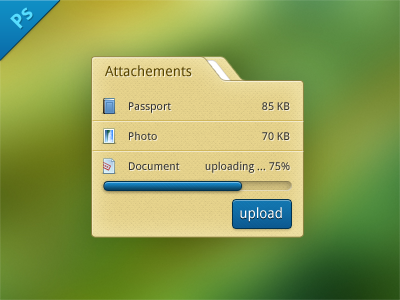
<style>
.page{position:relative;width:400px;height:300px}
.page>*{position:absolute;margin:0}
.t1{font:20px "DroidSans-Bold";color:#57ddff}
.t2{font:14px "DroidSans";color:#564300}
.t3{font:11px "DroidSans";color:#333333}
.t4{font:14px "DroidSans";color:#ffffff}
</style>
<div class="page">
<p class="t1" style="left:10px;top:7px;width:23px;height:22px;rotate:-45deg">Ps</p>
<p class="t2" style="left:105px;top:65px;width:87px;height:12px">Attachements</p>
<p class="t3" style="left:129px;top:102px;width:42px;height:11px">Passport</p>
<p class="t3" style="left:262px;top:102px;width:28px;height:8px">85 KB</p>
<p class="t3" style="left:129px;top:131px;width:28px;height:9px">Photo</p>
<p class="t3" style="left:262px;top:132px;width:28px;height:8px">70 KB</p>
<p class="t3" style="left:205px;top:161px;width:85px;height:12px">uploading ... 75%</p>
<p class="t3" style="left:129px;top:162px;width:51px;height:8px">Document</p>
<p class="t4" style="left:240px;top:207px;width:42px;height:15px">upload</p>
</div>
